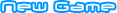
<style>
.page{position:relative;width:117px;height:13px;background:#ffffff}
.page>*{position:absolute;margin:0}
.t1{font:16px "ThundergodII";color:#ffffff}
</style>
<div class="page">
<p class="t1" style="left:2px;top:2px;width:113px;height:9px">New Game</p>
</div>
